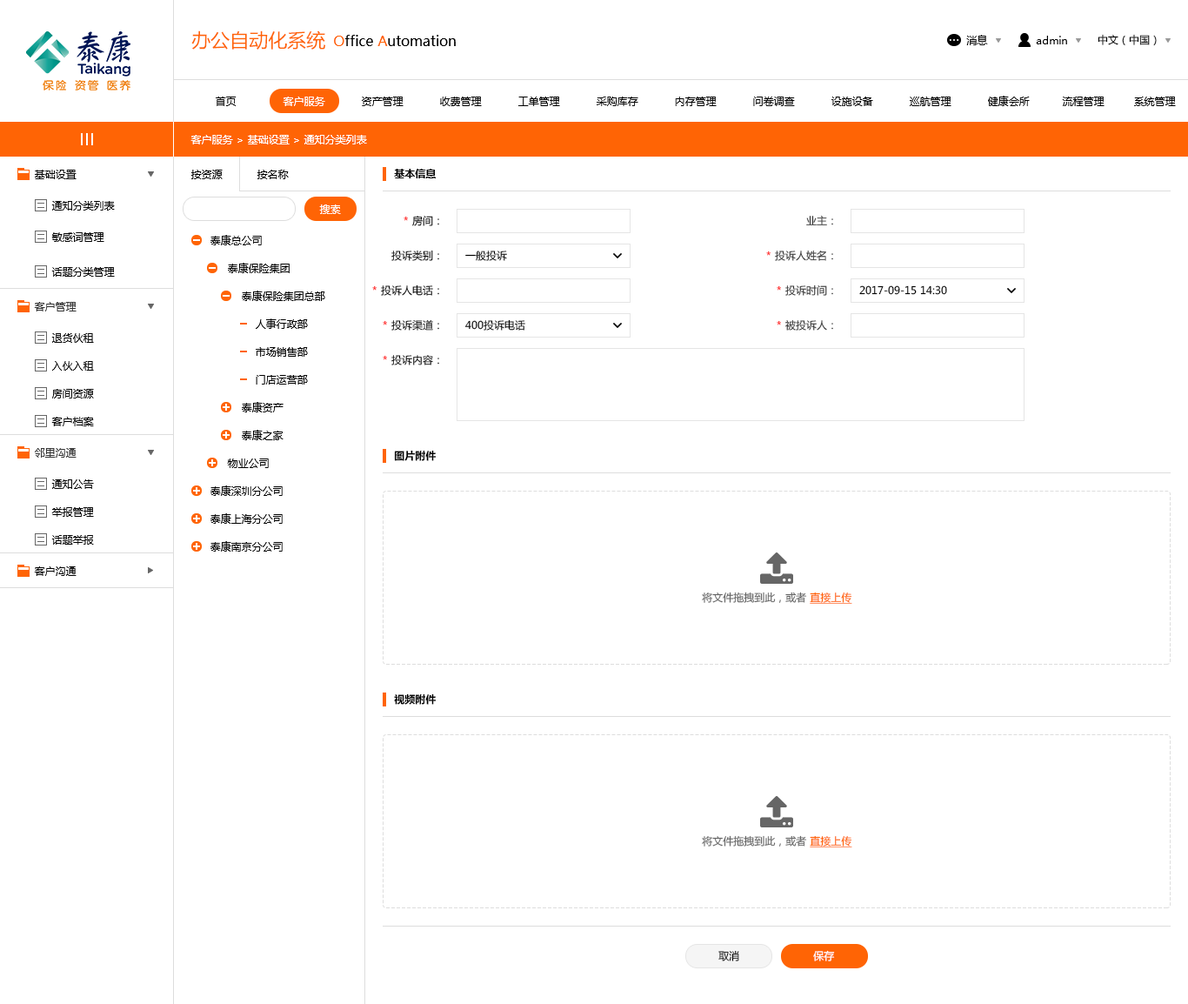
<style>
.page{position:relative;width:1188px;height:1004px;background:#ffffff}
.page>*{position:absolute;margin:0}
.t1{font:19.1px "MicrosoftYaHei";color:#ff6405}
.t2{font:13.9px "MicrosoftYaHei";color:#000000}
.t3{font:13.9px "MicrosoftYaHei";color:#ff6405}
.t4{font:10.4px "MicrosoftYaHei";color:#010101}
.t5{font:10.4px "MicrosoftYaHei";color:#000000}
.t6{font:10.4px "MicrosoftYaHei";color:#ffffff}
.t7{font:10.4px "MicrosoftYaHei-Bold";color:#000000}
.t8{font:10.4px/34.8px "MicrosoftYaHei";color:#000000}
.t9{font:10.4px/34.8px "MicrosoftYaHei";color:#333333}
.t10{font:10.4px/34.8px "MicrosoftYaHei";color:#ff0000}
.t11{font:10.4px/27.8px "MicrosoftYaHei";color:#000000}
.t12{font:10.4px "MicrosoftYaHei";color:#333333}
.t13{font:10.4px "MicrosoftYaHei";color:#666666}
.t14{font:10.4px "MicrosoftYaHei";color:#ff6405;text-decoration:underline}
</style>
<div class="page">
<p class="t1" style="left:191px;top:30px;width:134px;height:20px">办公自动化系统</p>
<p class="t2" style="left:334px;top:35px;width:122px;height:11px"><span class="t3">O</span>ffice<span class="t3"> A</span>utomation</p>
<p class="t4" style="left:966px;top:35px;width:22px;height:10px">消息</p>
<p class="t5" style="left:1036px;top:36px;width:31px;height:8px">admin</p>
<p class="t5" style="left:1098px;top:34px;width:59px;height:12px">中文（中国）</p>
<p class="t5" style="left:216px;top:97px;width:21px;height:9px">首页</p>
<p class="t6" style="left:283px;top:97px;width:42px;height:9px">客户服务</p>
<p class="t5" style="left:362px;top:97px;width:42px;height:9px">资产管理</p>
<p class="t5" style="left:440px;top:97px;width:42px;height:9px">收费管理</p>
<p class="t5" style="left:518px;top:97px;width:42px;height:9px">工单管理</p>
<p class="t5" style="left:597px;top:97px;width:41px;height:9px">采购库存</p>
<p class="t5" style="left:675px;top:97px;width:42px;height:9px">内存管理</p>
<p class="t5" style="left:753px;top:97px;width:42px;height:9px">问卷调查</p>
<p class="t5" style="left:831px;top:97px;width:42px;height:9px">设施设备</p>
<p class="t5" style="left:910px;top:97px;width:41px;height:9px">巡航管理</p>
<p class="t5" style="left:988px;top:96px;width:42px;height:10px">健康会所</p>
<p class="t5" style="left:1062px;top:97px;width:43px;height:9px">流程管理</p>
<p class="t5" style="left:1134px;top:97px;width:42px;height:9px">系统管理</p>
<p class="t6" style="left:190px;top:135px;width:177px;height:9px">客户服务 &gt; 基础设置 &gt; 通知分类列表</p>
<p class="t4" style="left:35px;top:170px;width:42px;height:9px">基础设置</p>
<p class="t5" style="left:190px;top:170px;width:33px;height:9px">按资源</p>
<p class="t5" style="left:257px;top:170px;width:32px;height:9px">按名称</p>
<p class="t7" style="left:394px;top:169px;width:42px;height:9px">基本信息</p>
<p class="t5" style="left:51px;top:201px;width:64px;height:9px">通知分类列表</p>
<p class="t6" style="left:319px;top:204px;width:22px;height:10px">搜索</p>
<p class="t8" style="left:372px;top:216px;width:67px;height:149px;text-align:right">* 房间：<br>投诉类别：<br>* 投诉人电话：<br>* 投诉渠道：<br>* 投诉内容：</p>
<p class="t9" style="left:766px;top:215px;width:67px;height:116px;text-align:right">业主：<br><span class="t10">* </span>投诉人姓名：<br><span class="t10">* </span>投诉时间：<br><span class="t10">* </span>被投诉人：</p>
<p class="t5" style="left:51px;top:232px;width:53px;height:10px">敏感词管理</p>
<p class="t11" style="left:210px;top:235px;width:115px;height:316px">泰康总公司<br>     泰康保险集团 <br>         泰康保险集团总部<br>             人事行政部<br>             市场销售部<br>             门店运营部<br>         泰康资产<br>         泰康之家<br>     物业公司<br>泰康深圳分公司<br>泰康上海分公司<br>泰康南京分公司</p>
<p class="t5" style="left:465px;top:250px;width:42px;height:11px">一般投诉</p>
<p class="t5" style="left:51px;top:267px;width:64px;height:10px">话题分类管理</p>
<p class="t5" style="left:859px;top:285px;width:88px;height:10px">2017-09-15 14:30</p>
<p class="t12" style="left:34px;top:302px;width:43px;height:9px">客户管理</p>
<p class="t5" style="left:464px;top:319px;width:61px;height:12px">400投诉电话</p>
<p class="t4" style="left:51px;top:333px;width:43px;height:10px">退货伙租</p>
<p class="t4" style="left:52px;top:361px;width:42px;height:10px">入伙入租</p>
<p class="t4" style="left:52px;top:389px;width:42px;height:9px">房间资源</p>
<p class="t4" style="left:51px;top:417px;width:43px;height:9px">客户档案</p>
<p class="t12" style="left:35px;top:448px;width:42px;height:9px">邻里沟通</p>
<p class="t7" style="left:394px;top:450px;width:42px;height:11px">图片附件</p>
<p class="t5" style="left:51px;top:479px;width:43px;height:10px">通知公告</p>
<p class="t4" style="left:51px;top:507px;width:43px;height:10px">举报管理</p>
<p class="t5" style="left:51px;top:535px;width:43px;height:9px">话题举报</p>
<p class="t5" style="left:34px;top:566px;width:43px;height:10px">客户沟通</p>
<p class="t13" style="left:702px;top:591px;width:150px;height:13px">将文件拖拽到此，或者 <span class="t14">直接上传</span></p>
<p class="t7" style="left:394px;top:693px;width:42px;height:11px">视频附件</p>
<p class="t13" style="left:702px;top:835px;width:150px;height:12px">将文件拖拽到此，或者 <span class="t14">直接上传</span></p>
<p class="t4" style="left:718px;top:950px;width:21px;height:11px">取消</p>
<p class="t6" style="left:813px;top:950px;width:22px;height:11px">保存</p>
</div>
